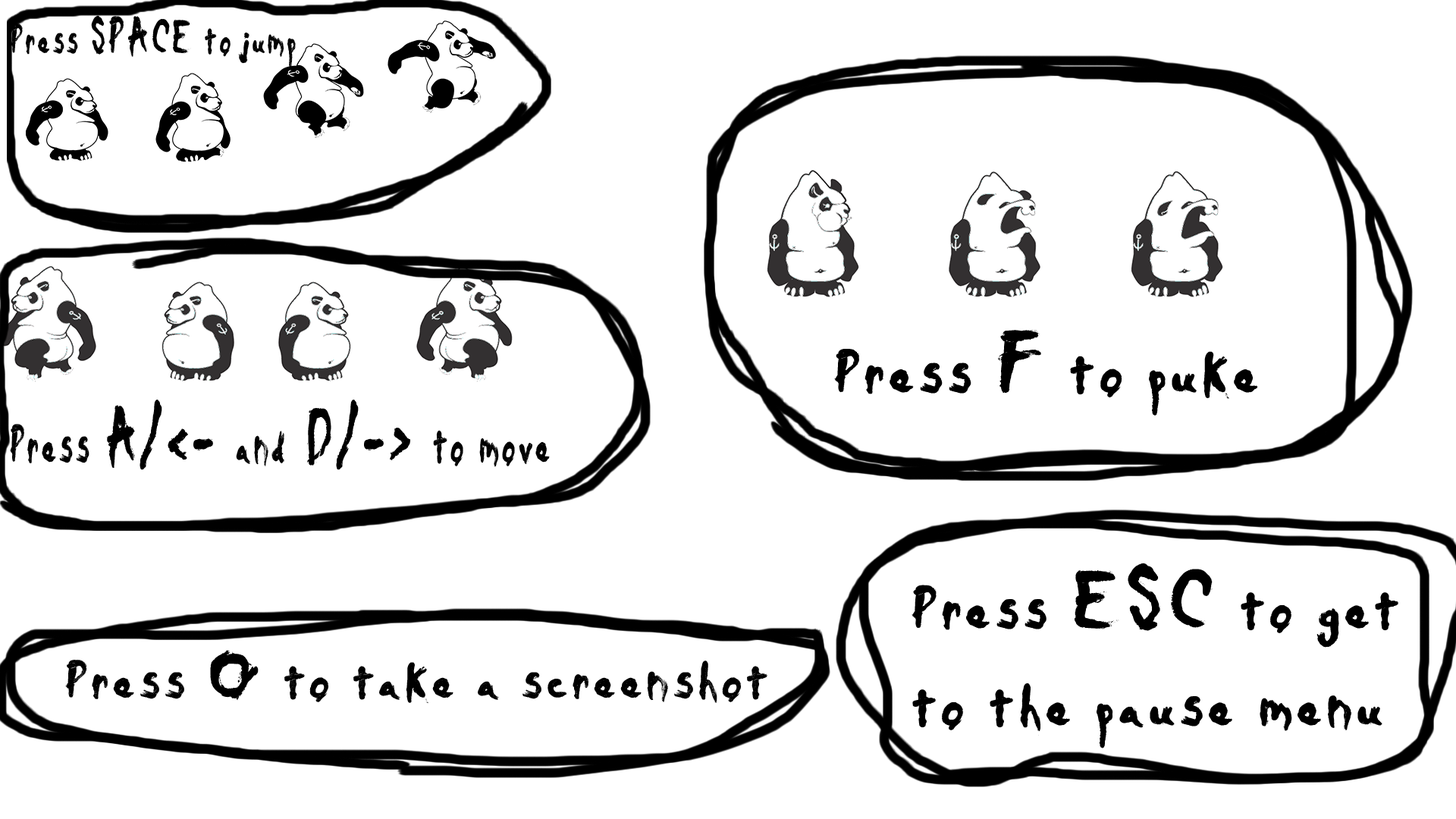
<style>
.page{position:relative;width:1456px;height:819px;background:#ffffff}
.page>*{position:absolute;margin:0}
.t1{font:55.9px "Daubmark";color:#000000;scale:0.72 1}
.t2{font:69.9px "Daubmark";color:#000000;scale:0.72 1}
.t3{font:82.2px "Daubmark";color:#000000}
.t4{font:123.3px "Daubmark";color:#000000}
.t5{font:71.5px "Daubmark";color:#000000;scale:0.67 1}
.t6{font:107.3px "Daubmark";color:#000000;scale:0.67 1}
.t7{font:81.1px "Daubmark";color:#000000}
.t8{font:121.7px "Daubmark";color:#000000}
.t9{font:71.9px "Daubmark";color:#000000}
.t10{font:107.9px "Daubmark";color:#000000}
</style>
<div class="page">
<p class="t1" style="left:10px;top:15px;width:286px;height:54px">Press <span class="t2">SPACE</span> to jump</p>
<p class="t3" style="left:834px;top:330px;width:424px;height:86px">Press <span class="t4">F</span> to puke</p>
<p class="t5" style="left:10px;top:400px;width:540px;height:70px">Press <span class="t6">A/&lt;- </span>and<span class="t6"> D/-&gt; </span>to move</p>
<p class="t7" style="left:912px;top:563px;width:486px;height:185px">Press <span class="t8">ESC</span> to get <br>to the pause menu</p>
<p class="t9" style="left:65px;top:650px;width:702px;height:54px">Press <span class="t10">O</span> to take a screenshot</p>
</div>
